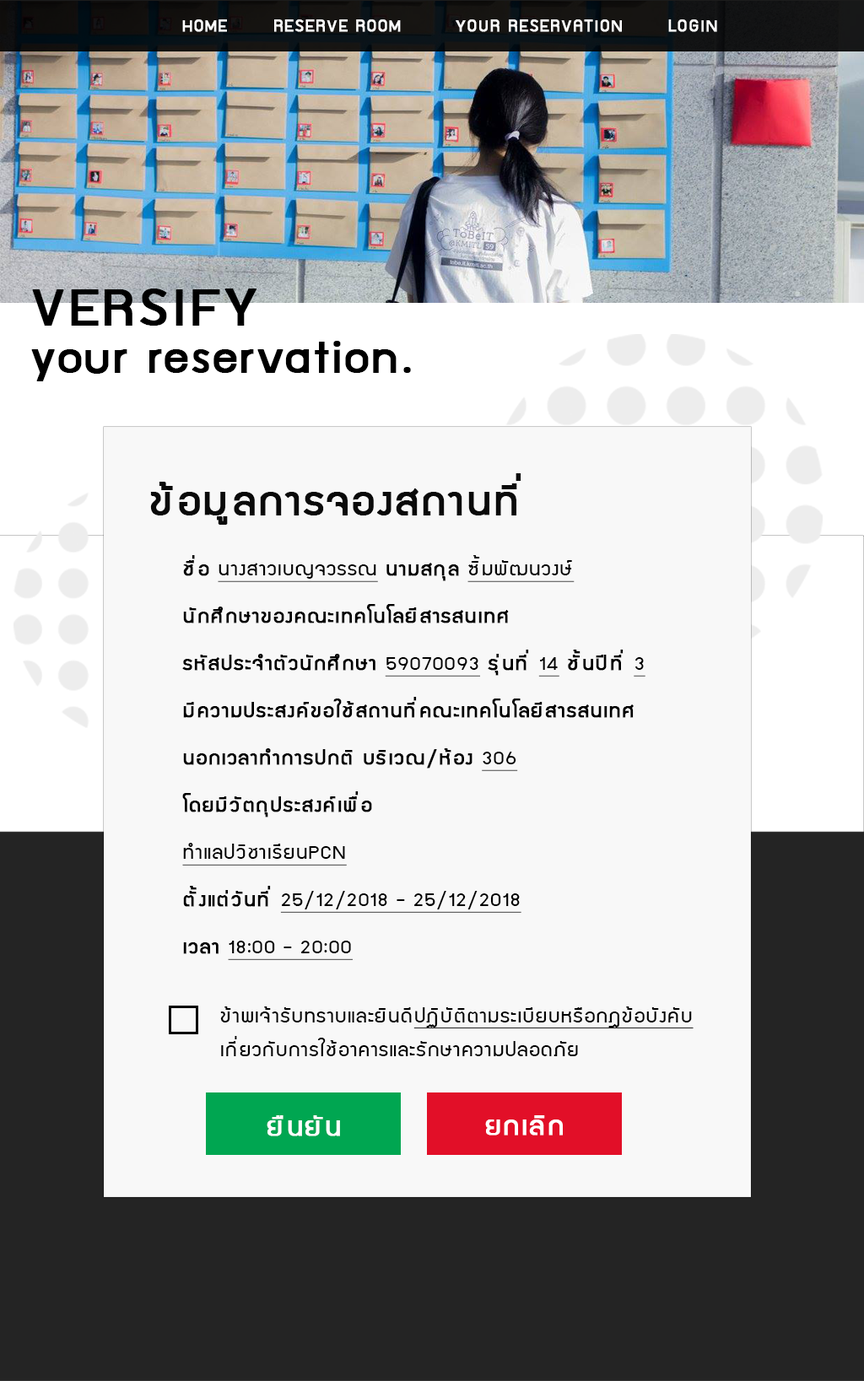
<style>
.page{position:relative;width:864px;height:1381px;background:#f8f8f8}
.page>*{position:absolute;margin:0}
.t1{font:18.1px "supermarket";letter-spacing:0.04em;color:#ffffff;font-weight:bold;scale:1.08 1}
.t2{font:48.6px/47.2px "supermarket";letter-spacing:0.04em;color:#000000;font-weight:bold;scale:1.08 1}
.t3{font:58.8px/47.2px "supermarket";letter-spacing:0.04em;color:#000000;font-weight:bold;scale:1.08 1}
.t4{font:43.5px "supermarket";letter-spacing:0.04em;color:#0a0a0a;font-weight:bold;scale:1.08 1}
.t5{font:21px/47.2px "supermarket";letter-spacing:0.04em;color:#000000;font-weight:bold;scale:1.08 1}
.t6{font:21px/47.2px "supermarket";letter-spacing:0.04em;color:#000000;text-decoration:underline;scale:1.08 1}
.t7{font:21px/33.7px "supermarket";letter-spacing:0.04em;color:#000000;scale:1.08 1}
.t8{font:21px/33.7px "supermarket";letter-spacing:0.04em;color:#000000;text-decoration:underline;scale:1.08 1}
.t9{font:29px "supermarket";letter-spacing:0.04em;color:#ffffff;font-weight:bold;scale:1.08 1}
</style>
<div class="page">
<p class="t1" style="left:182px;top:19px;width:535px;height:13px">HOME  RESERVE ROOM  YOUR RESERVATION  LOGIN</p>
<p class="t2" style="left:31px;top:288px;width:380px;height:93px"><span class="t3">VERSIFY<br></span>your reservation.</p>
<p class="t4" style="left:150px;top:473px;width:371px;height:52px">ข้อมูลการจองสถานที่</p>
<p class="t5" style="left:182px;top:555px;width:463px;height:405px">ชื่อ <span class="t6">นางสาวเบญจวรรณ</span> นามสกุล <span class="t6">ซิ้มพัฒนวงษ์<br></span>นักศึกษาของคณะเทคโนโลยีสารสนเทศ<br>รหัสประจำตัวนักศึกษา <span class="t6">59070093</span> รุ่นที่ <span class="t6">14</span> ชั้นปีที่ <span class="t6">3<br></span>มีความประสงค์ขอใช้สถานที่คณะเทคโนโลยีสารสนเทศ<br>นอกเวลาทำการปกติ บริเวณ/ห้อง <span class="t6">306<br></span>โดยมีวัตถุประสงค์เพื่อ<br><span class="t6">ทำแลปวิชาเรียนPCN<br></span>ตั้งแต่วันที่ <span class="t6">25/12/2018 - 25/12/2018<br></span>เวลา <span class="t6">18:00 - 20:00</span></p>
<p class="t7" style="left:220px;top:1006px;width:473px;height:50px">ข้าพเจ้ารับทราบและยินดี<span class="t8">ปฏิบัติตามระเบียบหรือกฎข้อบังคับ<br></span>เกี่ยวกับการใช้อาคารและรักษาความปลอดภัย</p>
<p class="t9" style="left:267px;top:1115px;width:73px;height:21px">ยืนยัน</p>
<p class="t9" style="left:485px;top:1115px;width:78px;height:20px">ยกเลิก</p>
</div>
